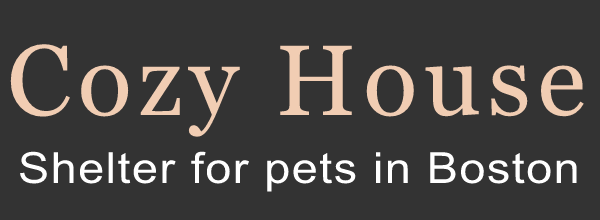
<style>
.page{position:relative;width:600px;height:220px;background:#333333}
.page>*{position:absolute;margin:0}
.t1{font:100px "Georgia";letter-spacing:0.065em;color:#f1cdb3}
.t2{font:43px "ArialMT";letter-spacing:0.033em;color:#ffffff;scale:1.09 1}
</style>
<div class="page">
<p class="t1" style="left:10px;top:44px;width:574px;height:93px">Cozy House</p>
<p class="t2" style="left:20px;top:151px;width:557px;height:41px">Shelter for pets in Boston</p>
</div>
